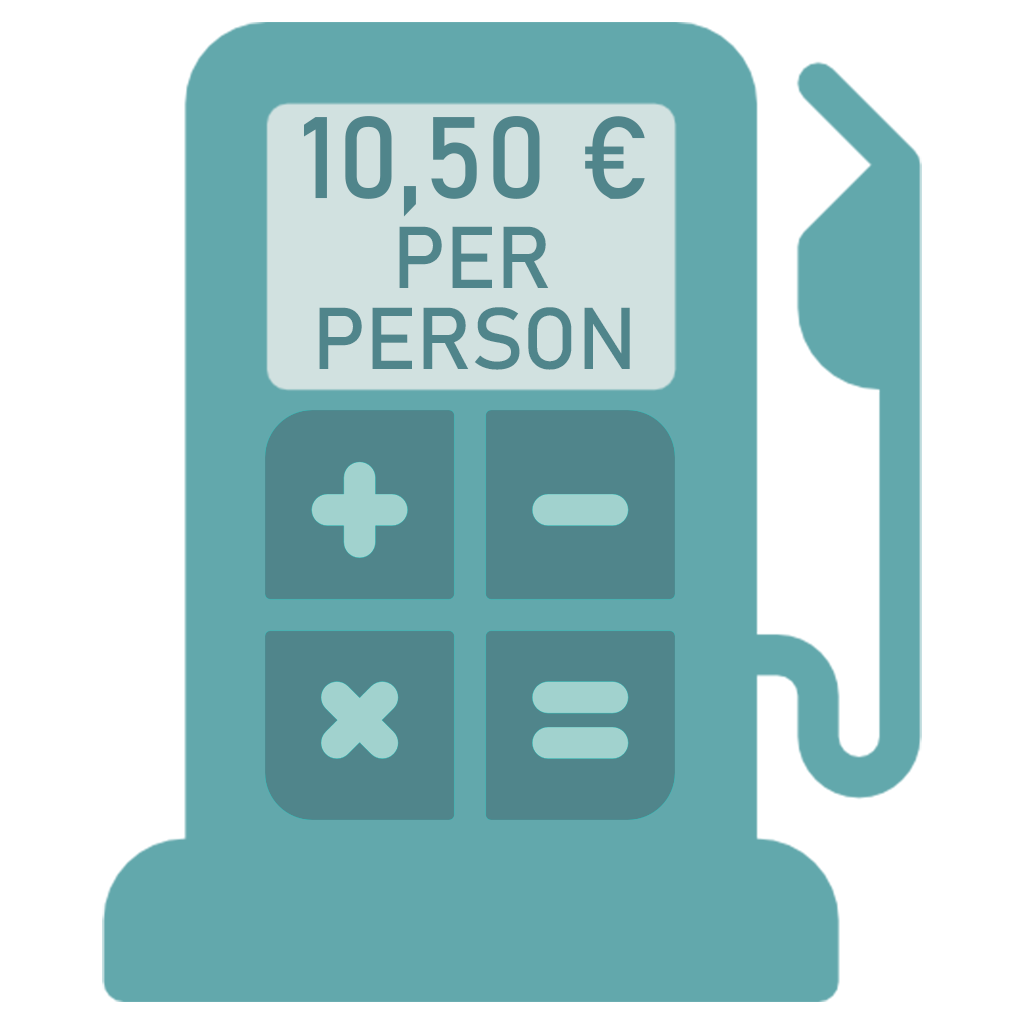
<style>
.page{position:relative;width:1024px;height:1024px;background:#ffffff}
.page>*{position:absolute;margin:0}
.t1{font:195.8px "Bahnschrift";color:#50858b}
.t2{font:148px "Bahnschrift";color:#50858b}
</style>
<div class="page">
<p class="t1" style="left:304px;top:116px;width:341px;height:101px">10,50 €</p>
<p class="t2" style="left:399px;top:226px;width:150px;height:62px">PER</p>
<p class="t2" style="left:319px;top:307px;width:311px;height:63px">PERSON</p>
</div>
